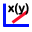
<style>
.page{position:relative;width:32px;height:32px;background:#ffffff}
.page>*{position:absolute;margin:0}
.t1{font:12px "ArialRoundedMTBold";color:#020202}
</style>
<div class="page">
<p class="t1" style="left:8px;top:3px;width:21px;height:12px">x(y)</p>
</div>
